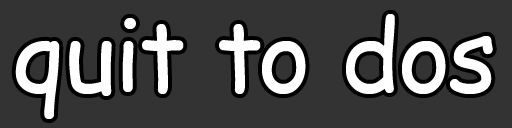
<style>
.page{position:relative;width:512px;height:128px;background:#333333}
.page>*{position:absolute;margin:0}
.t1{font:100px "ComicSansMS";color:#ffffff}
</style>
<div class="page">
<p class="t1" style="left:15px;top:14px;width:478px;height:105px">quit to dos</p>
</div>
